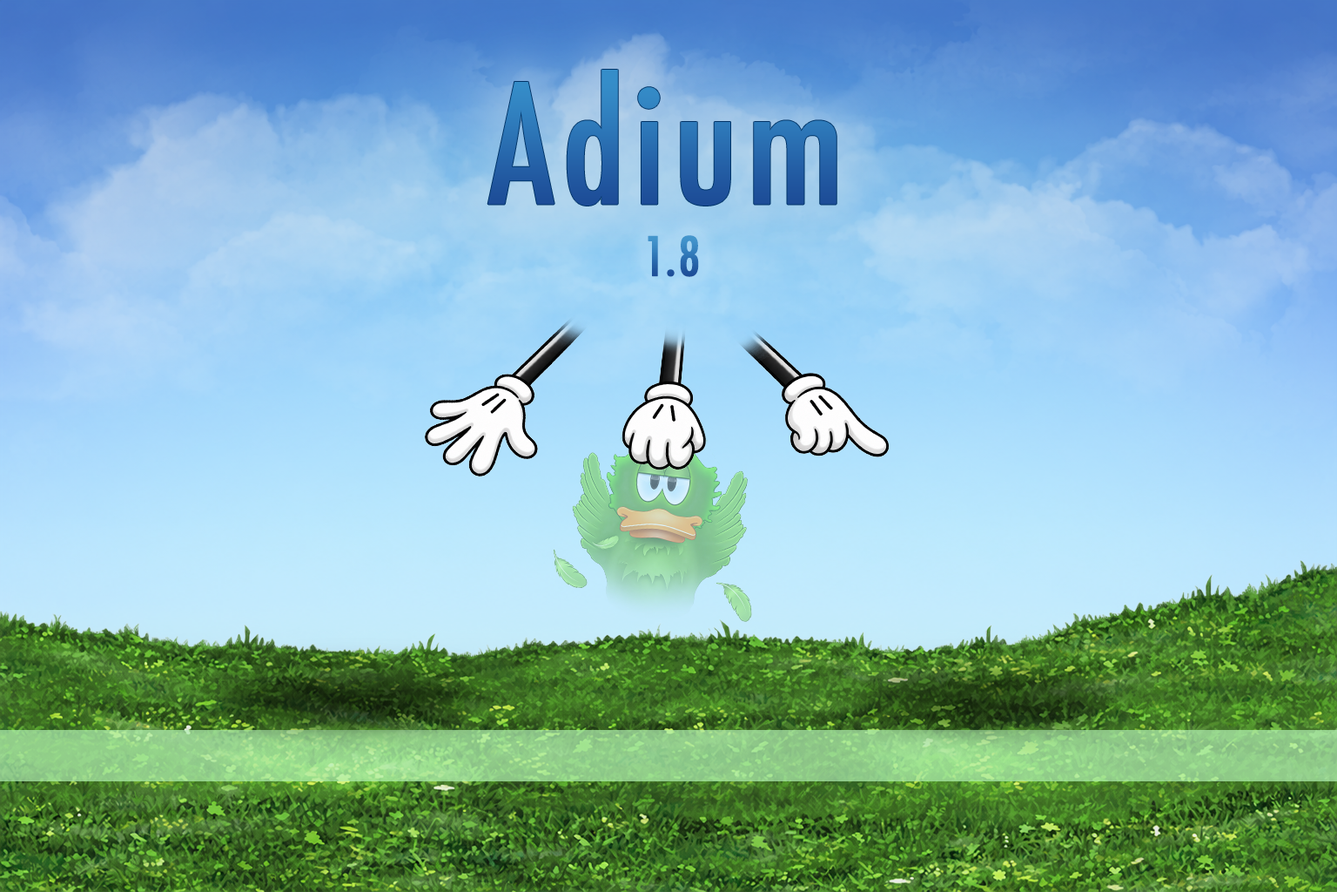
<style>
.page{position:relative;width:1337px;height:892px}
.page>*{position:absolute;margin:0}
.t1{font:161.1px "Futura-CondensedMedium";letter-spacing:0.02em;color:#286aae;font-weight:bold}
.t2{font:52.2px "Futura-CondensedMedium";letter-spacing:0.02em;font-weight:bold}
</style>
<div class="page">
<p class="t1" style="left:488px;top:70px;width:349px;height:135px">Adium</p>
<p class="t2" style="left:648px;top:235px;width:51px;height:42px">1.8</p>
</div>
